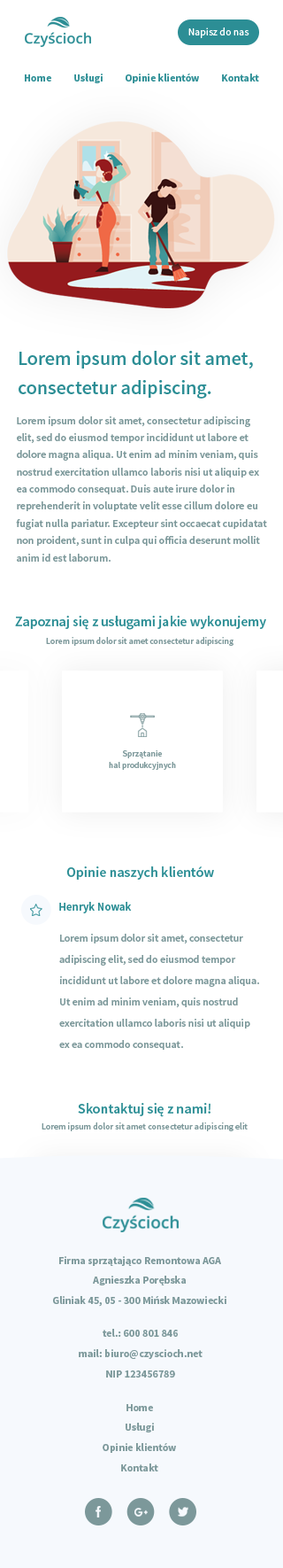
<style>
.page{position:relative;width:283px;height:1568px;background:#ffffff}
.page>*{position:absolute;margin:0}
.t1{font:10.6px "SourceSansPro-Regular";color:#ffffff}
.t2{font:10.6px "SourceSansPro-Bold";color:#2c8e95}
.t3{font:19.5px/29.1px "SourceSansPro-Semibold";color:#2c8e95}
.t4{font:10.6px/17.2px "SourceSansPro-Semibold";color:#7c989a}
.t5{font:14.2px "SourceSansPro-Semibold";color:#2c8e95}
.t6{font:8.9px "SourceSansPro-Semibold";color:#7c989a}
.t7{font:8.5px/11.2px "SourceSansPro-Semibold";color:#7c989a}
.t8{font:11.5px "SourceSansPro-Semibold";color:#2c8e95}
.t9{font:10.6px/21.3px "SourceSansPro-Semibold";color:#7c989a}
.t10{font:10.6px/20.2px "SourceSansPro-Bold";color:#7c989a}
</style>
<div class="page">
<p class="t1" style="left:189px;top:27px;width:61px;height:11px">Napisz do nas</p>
<p class="t2" style="left:25px;top:74px;width:235px;height:9px">Home          Usługi          Opinie klientów          Kontakt</p>
<p class="t3" style="left:19px;top:351px;width:234px;height:48px">Lorem ipsum dolor sit amet, <br>consectetur adipiscing.</p>
<p class="t4" style="left:16px;top:416px;width:252px;height:146px">Lorem ipsum dolor sit amet, consectetur adipiscing <br>elit, sed do eiusmod tempor incididunt ut labore et <br>dolore magna aliqua. Ut enim ad minim veniam, quis <br>nostrud exercitation ullamco laboris nisi ut aliquip ex <br>ea commodo consequat. Duis aute irure dolor in <br>reprehenderit in voluptate velit esse cillum dolore eu <br>fugiat nulla pariatur. Excepteur sint occaecat cupidatat <br>non proident, sunt in culpa qui officia deserunt mollit <br>anim id est laborum.</p>
<p class="t5" style="left:15px;top:616px;width:252px;height:14px">Zapoznaj się z usługami jakie wykonujemy</p>
<p class="t6" style="left:46px;top:637px;width:188px;height:9px">Lorem ipsum dolor sit amet consectetur adipiscing</p>
<p class="t7" style="left:109px;top:750px;width:67px;height:20px;text-align:center">Sprzątanie <br>hal produkcyjnych</p>
<p class="t5" style="left:66px;top:866px;width:148px;height:14px">Opinie naszych klientów</p>
<p class="t8" style="left:59px;top:902px;width:73px;height:11px">Henryk Nowak</p>
<p class="t9" style="left:59px;top:934px;width:201px;height:116px">Lorem ipsum dolor sit amet, consectetur <br>adipiscing elit, sed do eiusmod tempor <br>incididunt ut labore et dolore magna aliqua. <br>Ut enim ad minim veniam, quis nostrud <br>exercitation ullamco laboris nisi ut aliquip <br>ex ea commodo consequat.</p>
<p class="t5" style="left:78px;top:1103px;width:133px;height:14px">Skontaktuj się z nami!</p>
<p class="t6" style="left:42px;top:1122px;width:206px;height:9px">Lorem ipsum dolor sit amet consectetur adipiscing elit</p>
<p class="t10" style="left:53px;top:1256px;width:174px;height:51px;text-align:center">Firma sprzątająco Remontowa AGA<br>Agnieszka Porębska<br>Gliniak 45, 05 - 300 Mińsk Mazowiecki</p>
<p class="t10" style="left:79px;top:1329px;width:124px;height:49px;text-align:center">tel.: 600 801 846<br>mail: biuro@czyscioch.net<br>NIP 123456789</p>
<p class="t10" style="left:103px;top:1404px;width:73px;height:67px;text-align:center">Home<br>Usługi<br>Opinie klientów<br>Kontakt</p>
</div>
